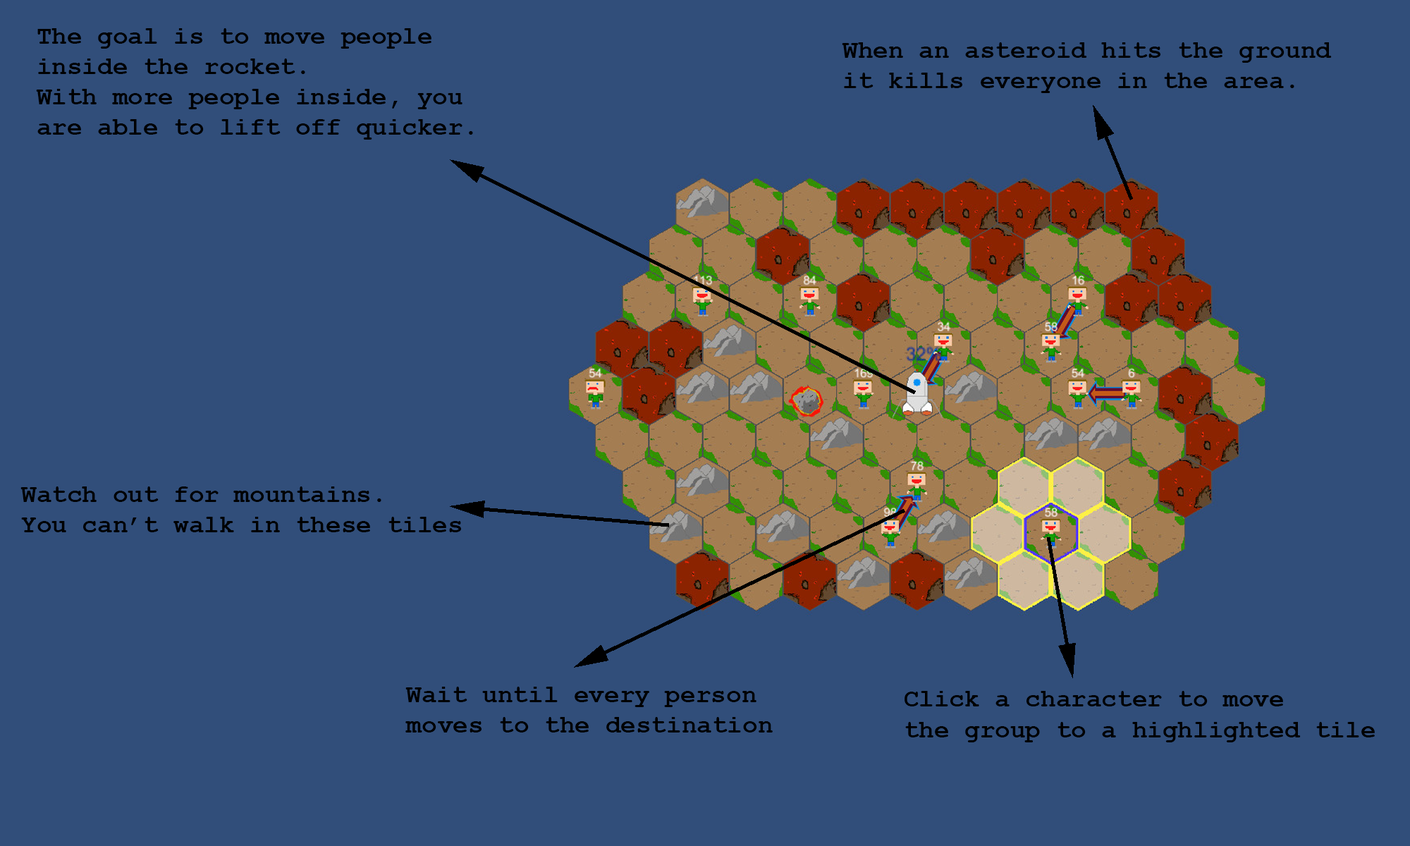
<style>
.page{position:relative;width:1410px;height:846px;background:#314e7a}
.page>*{position:absolute;margin:0}
.t1{font:25.4px "CourierNewPS-BoldMT";color:#000000}
</style>
<div class="page">
<p class="t1" style="left:36px;top:28px;width:437px;height:112px">The goal is to move people <br>inside the rocket. <br>With more people inside, you<br>are able to lift off quicker.</p>
<p class="t1" style="left:842px;top:42px;width:490px;height:51px">When an asteroid hits the ground<br>it kills everyone in the area.</p>
<p class="t1" style="left:20px;top:486px;width:441px;height:46px">Watch out for mountains.<br>You can’t walk in these tiles</p>
<p class="t1" style="left:405px;top:687px;width:368px;height:45px">Wait until every person <br>moves to the destination</p>
<p class="t1" style="left:904px;top:691px;width:471px;height:51px">Click a character to move <br>the group to a highlighted tile</p>
</div>
